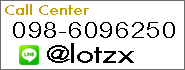
<style>
.page{position:relative;width:185px;height:70px;background:#ffffff}
.page>*{position:absolute;margin:0}
.t1{font:19px "DBBrandVoiceX";color:#c59e00;scale:1.26 1}
.t2{font:34px "CordiaNew";color:#000000;scale:1.26 1}
.t3{font:33px "DBAdmanX";color:#000000;scale:1.26 1}
</style>
<div class="page">
<p class="t1" style="left:5px;top:4px;width:84px;height:11px">Call Center</p>
<p class="t2" style="left:13px;top:22px;width:162px;height:16px">098-6096250</p>
<p class="t3" style="left:47px;top:43px;width:87px;height:20px">@lotzx</p>
</div>
